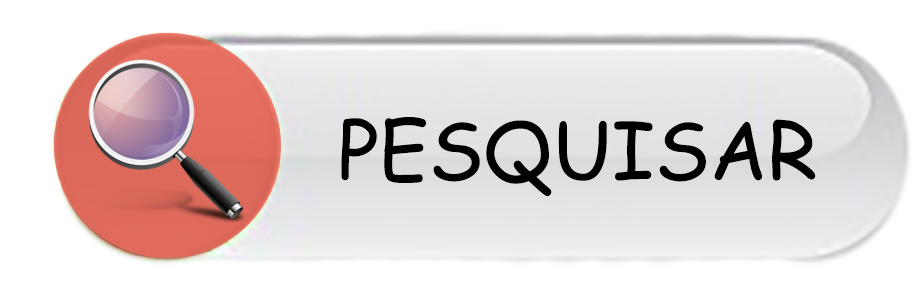
<style>
.page{position:relative;width:921px;height:308px;background:#ffffff}
.page>*{position:absolute;margin:0}
.t1{font:79.2px "ComicSansMS";color:#000000}
</style>
<div class="page">
<p class="t1" style="left:341px;top:117px;width:475px;height:80px">PESQUISAR</p>
</div>
